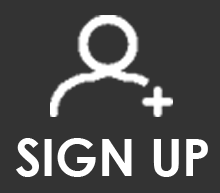
<style>
.page{position:relative;width:220px;height:193px;background:#333333}
.page>*{position:absolute;margin:0}
.t1{font:50.7px "CenturyGothic-Bold";color:#ffffff}
</style>
<div class="page">
<p class="t1" style="left:16px;top:138px;width:192px;height:39px">SIGN UP</p>
</div>
